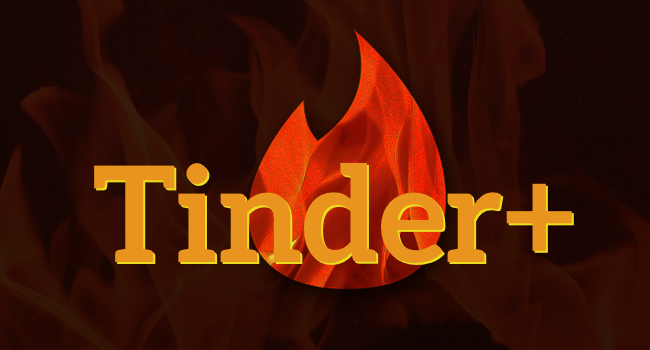
<style>
.page{position:relative;width:650px;height:350px}
.page>*{position:absolute;margin:0}
.t1{font:133.3px "Aleo-Bold";color:#e8941e}
</style>
<div class="page">
<p class="t1" style="left:94px;top:162px;width:478px;height:101px">Tinder+</p>
<p class="t1" style="left:96px;top:164px;width:478px;height:101px">Tinder+</p>
</div>
